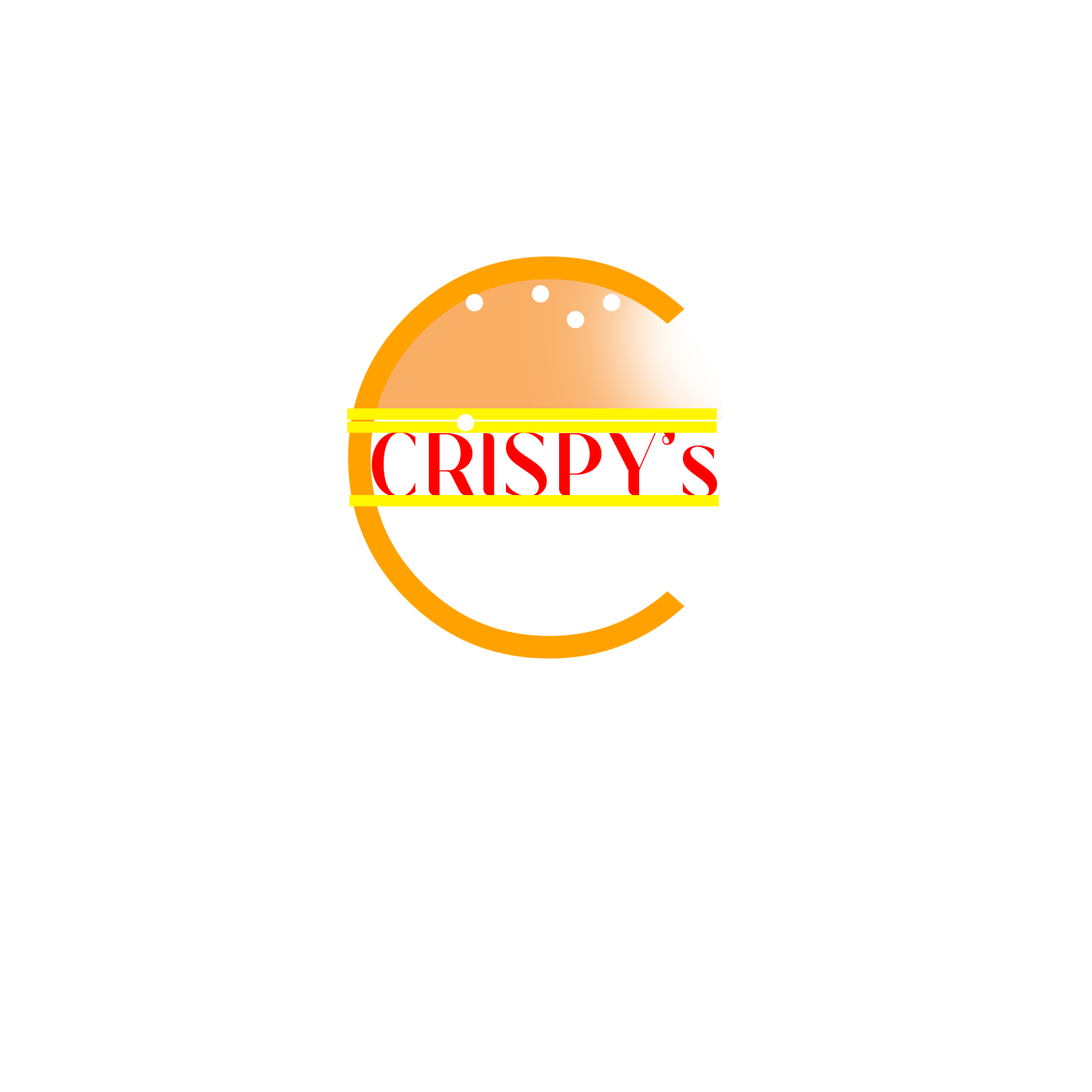
<style>
.page{position:relative;width:1092px;height:1092px;background:#ffffff}
.page>*{position:absolute;margin:0}
.t1{font:568.6px "Champagne&Limousines";letter-spacing:0.04em;color:#ffa200}
.t2{font:113.5px "MoneaAlegante-Regular";letter-spacing:0.04em;color:#ff0000;scale:0.87 1}
</style>
<div class="page">
<p class="t1" style="left:348px;top:256px;width:337px;height:403px">C</p>
<p class="t2" style="left:371px;top:426px;width:346px;height:71px">CRISPY’s</p>
</div>
